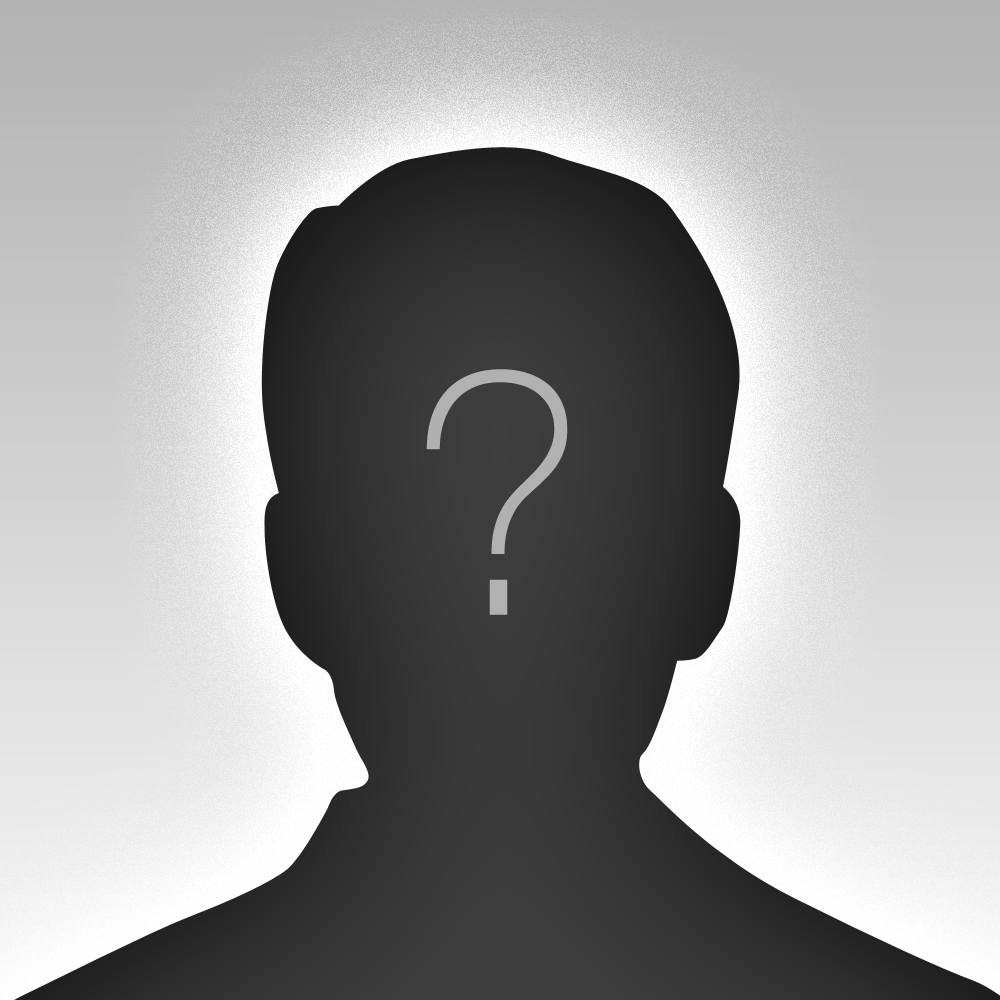
<style>
.page{position:relative;width:1000px;height:1000px}
.page>*{position:absolute;margin:0}
.t1{font:335.4px "HelveticaNeue-Thin";color:#b1b1b1}
</style>
<div class="page">
<p class="t1" style="left:426px;top:369px;width:142px;height:246px">?</p>
</div>
